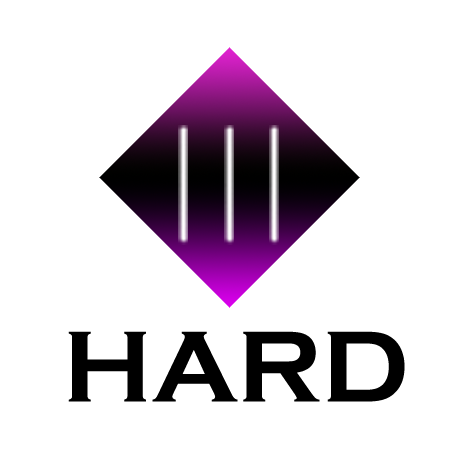
<style>
.page{position:relative;width:463px;height:463px;background:#ffffff}
.page>*{position:absolute;margin:0}
.t1{font:104.4px "CopperplateGothic-Bold";color:#000000}
</style>
<div class="page">
<p class="t1" style="left:68px;top:331px;width:337px;height:71px">HARD</p>
</div>
